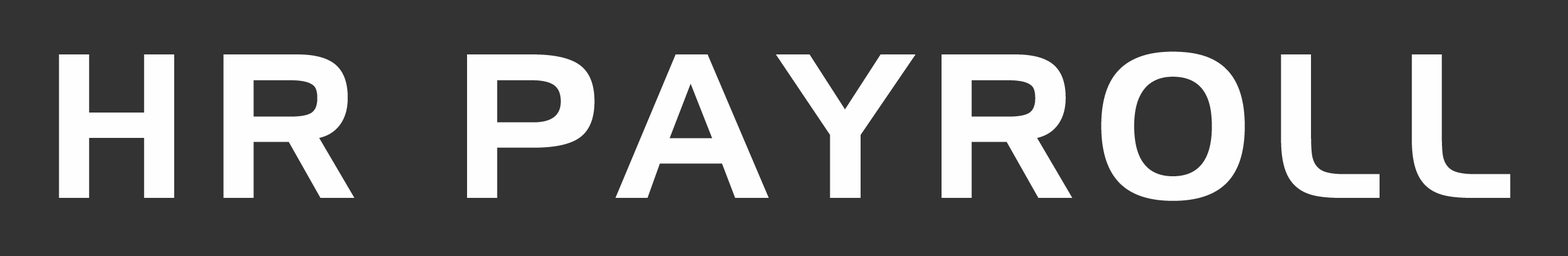
<style>
.page{position:relative;width:1568px;height:256px;background:#333333}
.page>*{position:absolute;margin:0}
.t1{font:198.8px "AeroRegularSWFTE";letter-spacing:0.1em;color:#fefefe}
</style>
<div class="page">
<p class="t1" style="left:59px;top:51px;width:1452px;height:150px">HR PAYROLL</p>
</div>
